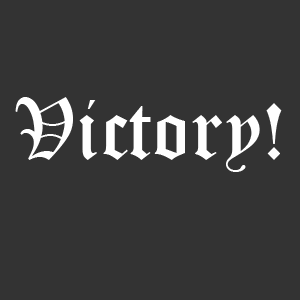
<style>
.page{position:relative;width:300px;height:300px;background:#333333}
.page>*{position:absolute;margin:0}
.t1{font:85px "OldEnglishTextMT";color:#ffffff}
</style>
<div class="page">
<p class="t1" style="left:15px;top:97px;width:267px;height:75px">Victory!</p>
</div>
